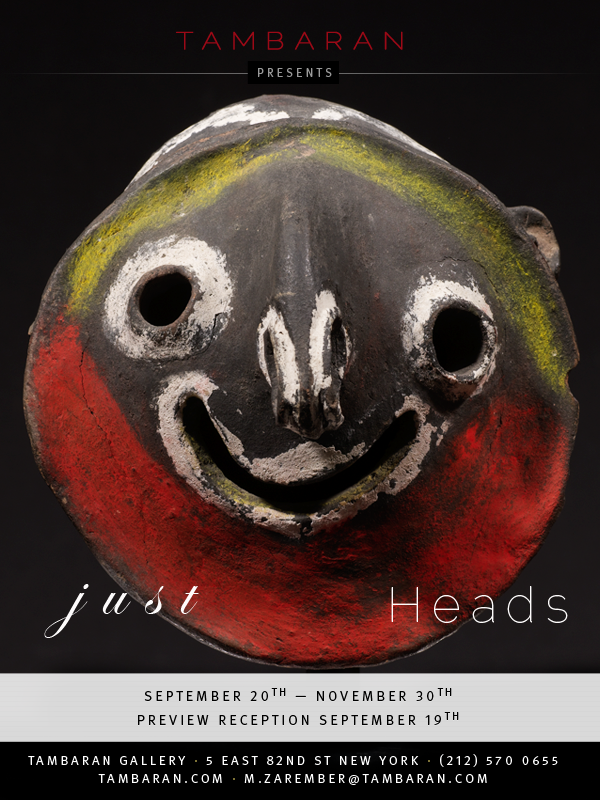
<style>
.page{position:relative;width:600px;height:800px}
.page>*{position:absolute;margin:0}
.t1{font:24px "Raleway-Thin";letter-spacing:0.33em;color:#9b0916;font-weight:bold;scale:1.2 1}
.t2{font:12px "MetaPro-Normal";letter-spacing:0.26em;color:#999999}
.t3{font:75.7px "EdwardianScriptITC";letter-spacing:0.26em;color:#fdfbfb}
.t4{font:49.2px "Raleway-Thin";letter-spacing:0.2em;color:#fdfbfb}
.t5{font:14px/24px "MetaPro-Normal";letter-spacing:0.22em;color:#000000;text-transform:uppercase}
.t6{font:11px/24px "MetaPro-Normal";letter-spacing:0.22em;color:#000000;text-transform:uppercase}
.t7{font:13px/18px "MetaPro-Normal";letter-spacing:0.22em;color:#ffffff;text-transform:uppercase}
.t8{font:13px/14px "MetaPro-Normal";letter-spacing:0.22em;color:#ab9b4a;text-transform:uppercase}
</style>
<div class="page">
<p class="t1" style="left:176px;top:31px;width:227px;height:19px">TAMBARAN</p>
<p class="t2" style="left:258px;top:68px;width:74px;height:9px">PRESENTS</p>
<p class="t3" style="left:44px;top:584px;width:155px;height:54px">just</p>
<p class="t4" style="left:391px;top:586px;width:177px;height:37px">Heads</p>
<p class="t5" style="left:138px;top:688px;width:321px;height:37px;text-align:justify">September 20<span class="t6">th</span> — November 30<span class="t6">th<br></span>Preview Reception September 19<span class="t6">th</span></p>
<p class="t7" style="left:28px;top:754px;width:530px;height:31px;text-align:justify">Tambaran Gallery <span class="t8">.</span> 5 East 82nd ST New YorK <span class="t8">.</span> (212) 570 0655<br>tambaran.com <span class="t8">.</span> M.Zarember@TAMBARAN.com</p>
</div>
